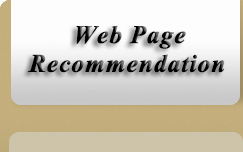
<style>
.page{position:relative;width:243px;height:152px;background:#fdfdfd}
.page>*{position:absolute;margin:0}
.t1{font:31.2px "Vijaya-Bold";letter-spacing:0.01em;color:#000000;font-weight:bold}
</style>
<div class="page">
<p class="t1" style="left:28px;top:25px;width:197px;height:48px">Web Page <br>Recommendation</p>
</div>
